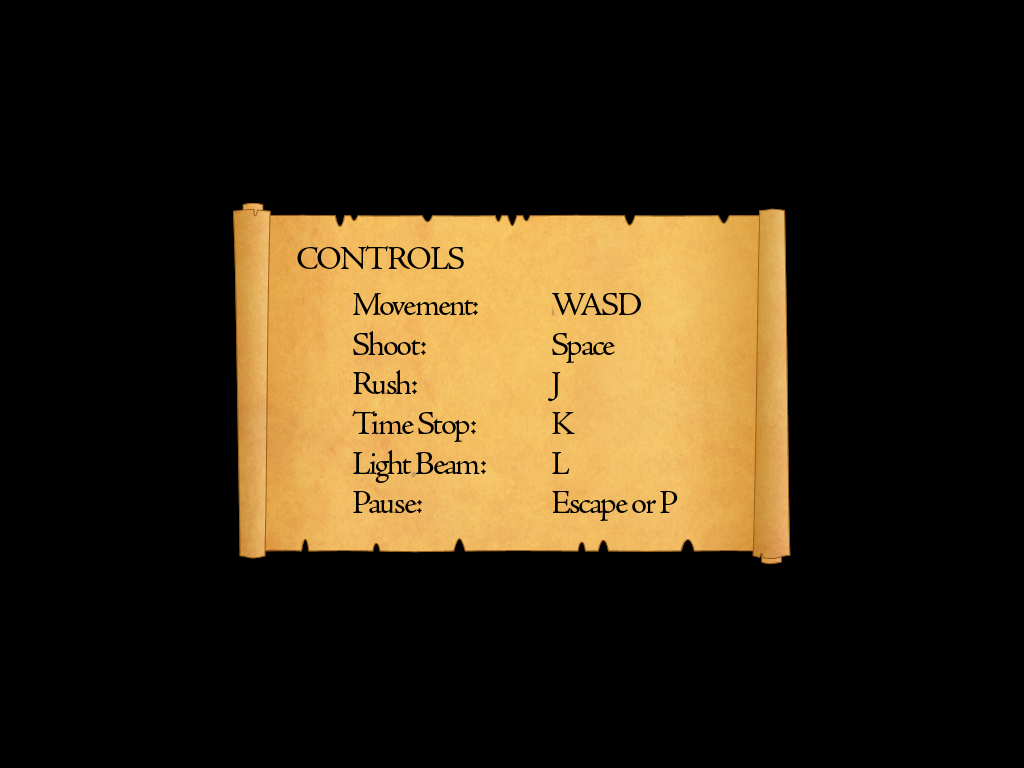
<style>
.page{position:relative;width:1024px;height:768px;background:#000000}
.page>*{position:absolute;margin:0}
.t1{font:33px "AJensonPro-Regular";letter-spacing:-0.06em;color:#000000}
</style>
<div class="page">
<p class="t1" style="left:297px;top:245px;width:167px;height:24px">CONTROLS</p>
<p class="t1" style="left:352px;top:293px;width:134px;height:220px">Movement:<br>Shoot:<br>Rush:<br>Time Stop:<br>Light Beam:<br>Pause:</p>
<p class="t1" style="left:548px;top:293px;width:130px;height:228px">WASD<br>Space<br>J<br>K<br>L<br>Escape or P</p>
</div>
